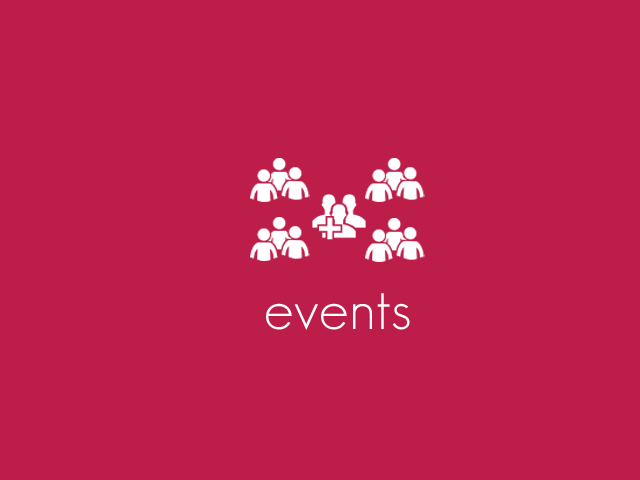
<style>
.page{position:relative;width:640px;height:480px;background:#bc1d49}
.page>*{position:absolute;margin:0}
.t1{font:60px "GeosansLight";color:#ffffff}
</style>
<div class="page">
<p class="t1" style="left:266px;top:293px;width:144px;height:37px">events</p>
</div>
